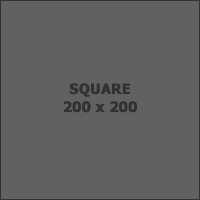
<style>
.page{position:relative;width:200px;height:200px;background:#616161}
.page>*{position:absolute;margin:0}
.t1{font:14px/18px "Tahoma-Bold";letter-spacing:0.01em;color:#323232;font-weight:bold}
</style>
<div class="page">
<p class="t1" style="left:63px;top:83px;width:74px;height:30px;text-align:center">SQUARE<br>200 x 200</p>
</div>
